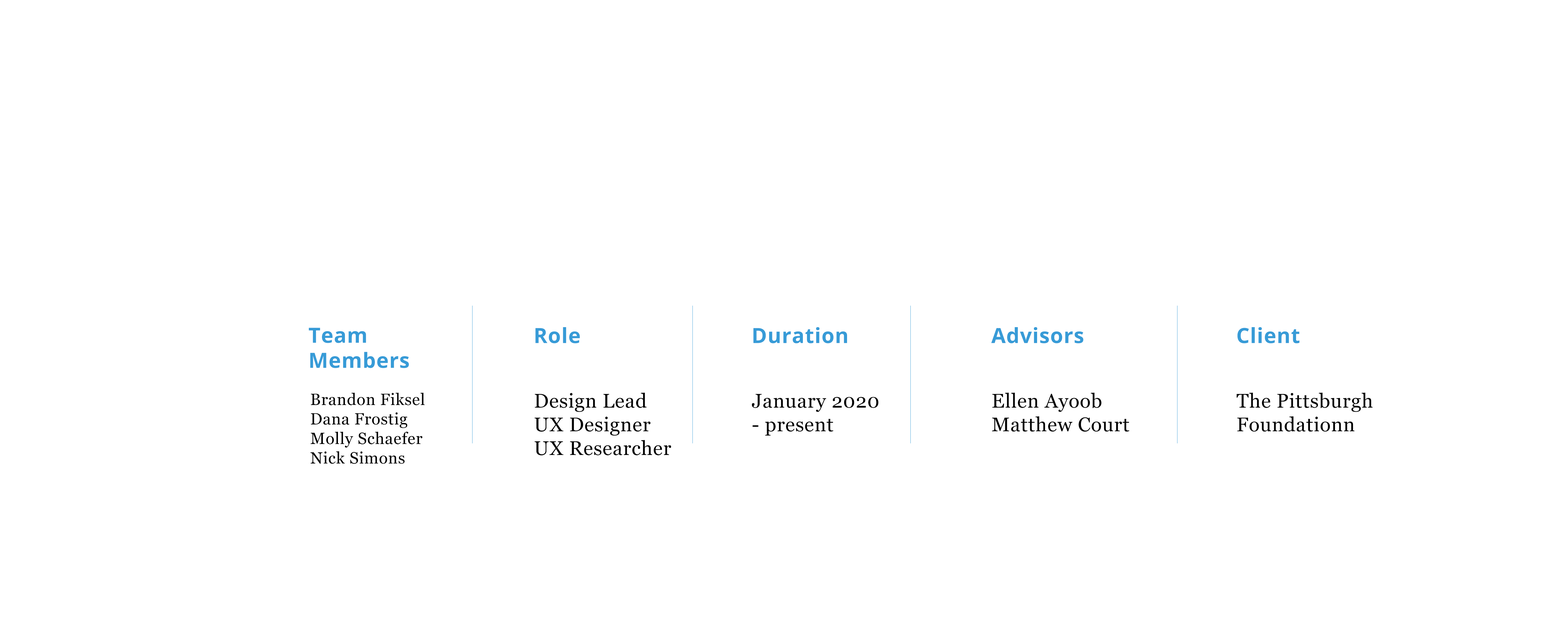
<style>
.page{position:relative;width:1568px;height:620px;background:#ffffff}
.page>*{position:absolute;margin:0}
.t1{font:20.9px "OpenSans-Bold";letter-spacing:0.025em;color:#379bd7}
.t2{font:16.3px "Georgia";letter-spacing:0.025em;color:#000000}
.t3{font:19.8px "Georgia";letter-spacing:0.025em;color:#000000}
</style>
<div class="page">
<p class="t1" style="left:309px;top:328px;width:100px;height:40px">Team <br>Members</p>
<p class="t1" style="left:535px;top:327px;width:45px;height:16px">Role</p>
<p class="t1" style="left:753px;top:327px;width:94px;height:16px">Duration</p>
<p class="t1" style="left:991px;top:327px;width:92px;height:16px">Advisors</p>
<p class="t1" style="left:1237px;top:327px;width:62px;height:16px">Client</p>
<p class="t2" style="left:310px;top:393px;width:115px;height:71px">Brandon Fiksel<br>Dana Frostig<br>Molly Schaefer<br>Nick Simons</p>
<p class="t3" style="left:534px;top:393px;width:137px;height:63px">Design Lead<br>UX Designer<br>UX Researcher</p>
<p class="t3" style="left:752px;top:394px;width:126px;height:42px">January 2020 <br>- present</p>
<p class="t3" style="left:992px;top:393px;width:137px;height:39px">Ellen Ayoob<br>Matthew Court</p>
<p class="t3" style="left:1236px;top:393px;width:137px;height:39px">The Pittsburgh <br>Foundationn</p>
</div>
